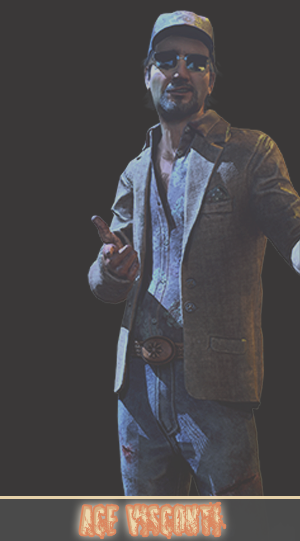
<style>
.page{position:relative;width:300px;height:541px;background:#3a3838}
.page>*{position:absolute;margin:0}
.t1{font:42px "SNIPER"}
</style>
<div class="page">
<p class="t1" style="left:80px;top:503px;width:145px;height:35px">Ace Visconti</p>
</div>
